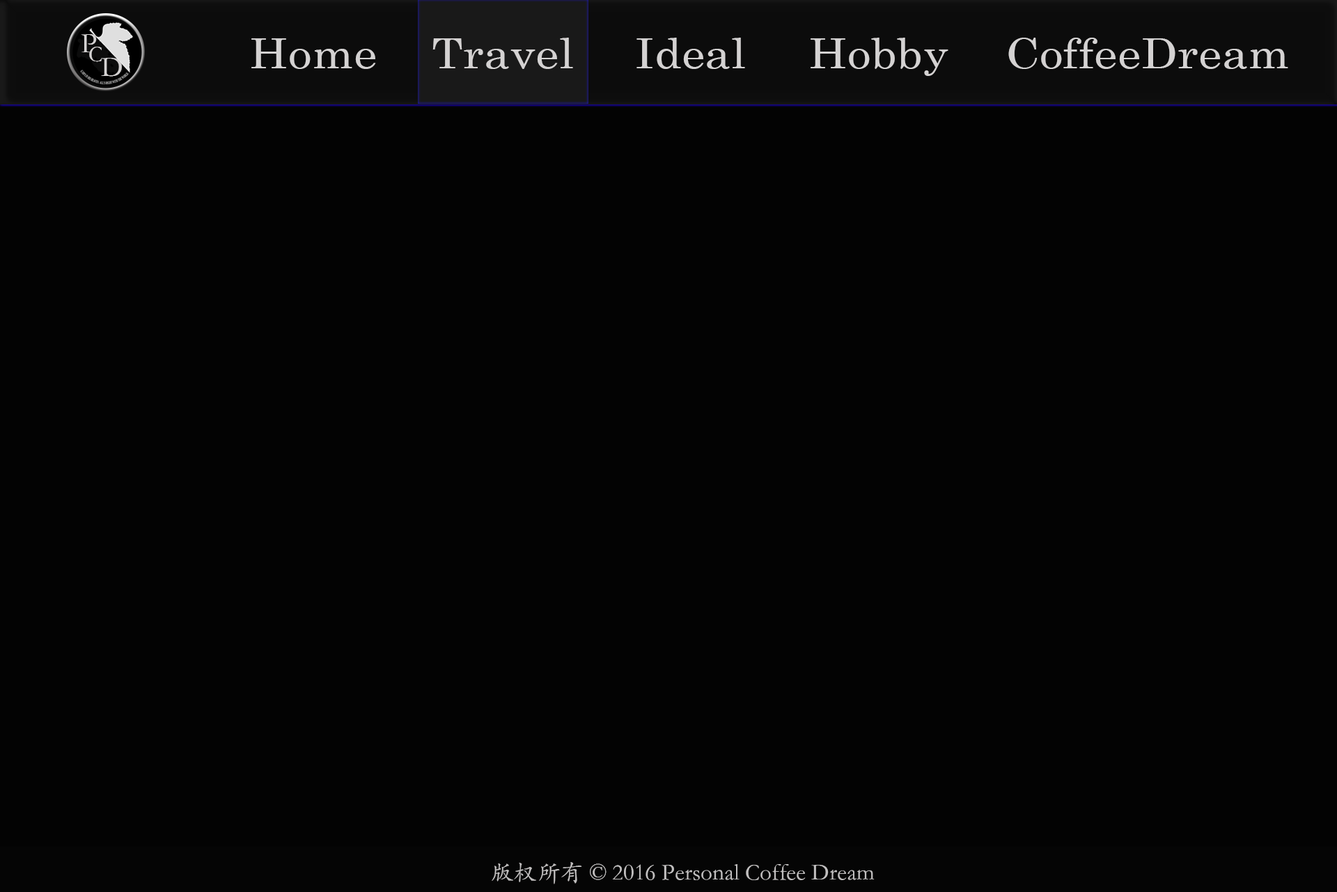
<style>
.page{position:relative;width:1337px;height:892px;background:#030303}
.page>*{position:absolute;margin:0}
.t1{font:28.8px "STKaiti";color:#d4d2d2}
.t2{font:41.6px "CenturySchoolbook";color:#d4d2d2;scale:1.13 1}
.t3{font:22.4px "STKaiti";color:#d4d2d2}
.t4{font:23.2px "STKaiti";color:#d4d2d2}
</style>
<div class="page">
<p class="t1" style="left:81px;top:34px;width:16px;height:19px">P</p>
<p class="t2" style="left:251px;top:38px;width:125px;height:31px">Home</p>
<p class="t2" style="left:433px;top:38px;width:140px;height:31px">Travel</p>
<p class="t2" style="left:637px;top:38px;width:108px;height:31px">Ideal</p>
<p class="t2" style="left:811px;top:38px;width:138px;height:38px">Hobby</p>
<p class="t2" style="left:1009px;top:38px;width:280px;height:31px">CoffeeDream</p>
<p class="t3" style="left:89px;top:47px;width:13px;height:15px">C</p>
<p class="t1" style="left:101px;top:58px;width:21px;height:19px">D</p>
<p class="t4" style="left:492px;top:862px;width:383px;height:22px">版权所有 © 2016 Personal Coffee Dream</p>
</div>
